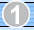
<style>
.page{position:relative;width:34px;height:30px;background:#bcbec0}
.page>*{position:absolute;margin:0}
.t1{font:26px "Arial-BoldMT";color:#ffffff}
</style>
<div class="page">
<p class="t1" style="left:11px;top:5px;width:8px;height:19px">1</p>
</div>
